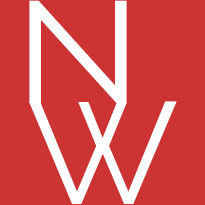
<style>
.page{position:relative;width:205px;height:205px;background:#cc3333}
.page>*{position:absolute;margin:0}
.t1{font:143.7px "Raleway";color:#ffffff;scale:1.13 1}
.t2{font:144px "Raleway";color:#ffffff}
</style>
<div class="page">
<p class="t1" style="left:29px;top:0px;width:98px;height:103px">N</p>
<p class="t2" style="left:29px;top:101px;width:148px;height:103px">W</p>
</div>
